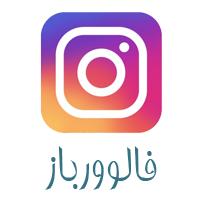
<style>
.page{position:relative;width:200px;height:200px;background:#ffffff}
.page>*{position:absolute;margin:0}
.t1{font:60px "BTabassom";color:#357283}
</style>
<div class="page">
<p class="t1" style="left:45px;top:146px;width:112px;height:44px">فالوورباز</p>
</div>
